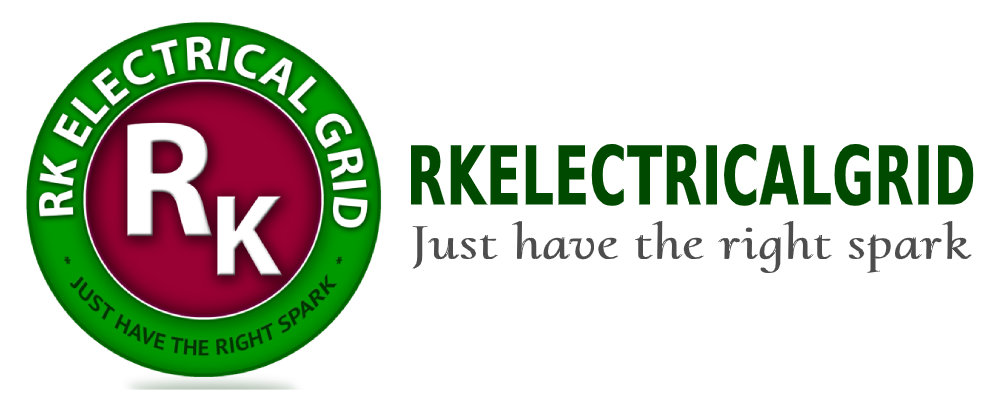
<style>
.page{position:relative;width:1000px;height:400px;background:#ffffff}
.page>*{position:absolute;margin:0}
.t1{font:81.6px "DejaVuSans-Bold";color:#004a00;font-weight:bold;scale:0.61 1}
.t2{font:51.8px "CormorantUpright-Regular";color:#4d4d4d;font-weight:bold;scale:1.1 1}
</style>
<div class="page">
<p class="t1" style="left:411px;top:144px;width:563px;height:62px">RKELECTRICALGRID</p>
<p class="t2" style="left:412px;top:221px;width:560px;height:52px">Just have the right spark</p>
</div>
